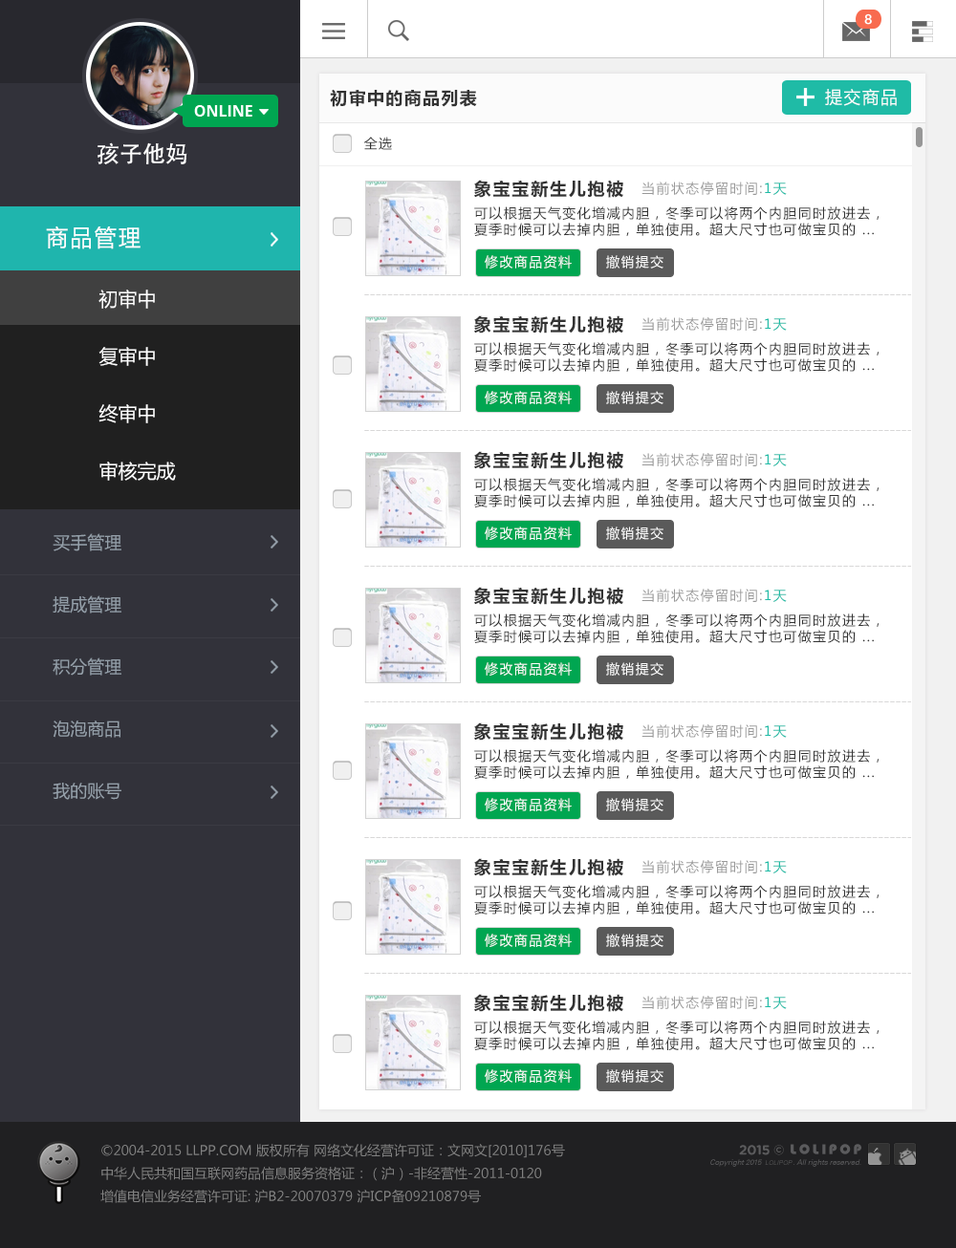
<style>
.page{position:relative;width:956px;height:1248px;background:#ffffff}
.page>*{position:absolute;margin:0}
.t1{font:17.2px "MicrosoftYaHei-Bold";letter-spacing:0.075em;color:#333333}
.t2{font:17.2px "MicrosoftYaHei";letter-spacing:0.075em;color:#ffffff}
.t3{font:15.3px "OpenSans-Bold";color:#ffffff;text-transform:uppercase}
.t4{font:13.4px "MicrosoftYaHei";letter-spacing:0.1em;color:#333333}
.t5{font:22.9px "AdobeHeitiStd-Regular";color:#ffffff}
.t6{font:17.2px "MicrosoftYaHei-Bold";letter-spacing:0.1em;color:#333333}
.t7{font:13.4px "MicrosoftYaHei";letter-spacing:0.1em;color:#999999}
.t8{font:13.4px "MicrosoftYaHei";letter-spacing:0.1em;color:#1fbba6}
.t9{font:22.9px "MicrosoftYaHei";letter-spacing:0.1em;color:#ffffff;scale:0.96 1}
.t10{font:13.4px "MicrosoftYaHei";letter-spacing:0.1em;color:#ffffff}
.t11{font:19.1px/57.3px "MicrosoftYaHei";color:#ffffff}
.t12{font:17.2px/62.1px "MicrosoftYaHei";color:#95a0aa}
</style>
<div class="page">
<p class="t1" style="left:330px;top:89px;width:147px;height:18px">初审中的商品列表</p>
<p class="t2" style="left:825px;top:89px;width:71px;height:17px">提交商品</p>
<p class="t3" style="left:194px;top:105px;width:58px;height:12px">Online</p>
<p class="t4" style="left:363px;top:137px;width:29px;height:13px">全选</p>
<p class="t5" style="left:97px;top:142px;width:90px;height:22px">孩子他妈</p>
<p class="t6" style="left:474px;top:180px;width:149px;height:18px">象宝宝新生儿抱被</p>
<p class="t7" style="left:641px;top:182px;width:145px;height:13px">当前状态停留时间:<span class="t8">1天</span></p>
<p class="t4" style="left:474px;top:206px;width:405px;height:30px">可以根据天气变化增减内胆，冬季可以将两个内胆同时放进去，夏季时候可以去掉内胆，单独使用。超大尺寸也可做宝贝的 ...</p>
<p class="t9" style="left:46px;top:226px;width:94px;height:23px">商品管理</p>
<p class="t10" style="left:484px;top:255px;width:87px;height:14px">修改商品资料</p>
<p class="t10" style="left:606px;top:255px;width:57px;height:14px">撤销提交</p>
<p class="t11" style="left:98px;top:290px;width:78px;height:191px">初审中<br>复审中<br>终审中<br>审核完成</p>
<p class="t6" style="left:474px;top:315px;width:149px;height:18px">象宝宝新生儿抱被</p>
<p class="t7" style="left:641px;top:317px;width:145px;height:14px">当前状态停留时间:<span class="t8">1天</span></p>
<p class="t4" style="left:474px;top:342px;width:405px;height:30px">可以根据天气变化增减内胆，冬季可以将两个内胆同时放进去，夏季时候可以去掉内胆，单独使用。超大尺寸也可做宝贝的 ...</p>
<p class="t10" style="left:484px;top:391px;width:87px;height:13px">修改商品资料</p>
<p class="t10" style="left:606px;top:391px;width:57px;height:13px">撤销提交</p>
<p class="t6" style="left:474px;top:451px;width:149px;height:18px">象宝宝新生儿抱被</p>
<p class="t7" style="left:641px;top:453px;width:145px;height:13px">当前状态停留时间:<span class="t8">1天</span></p>
<p class="t4" style="left:474px;top:478px;width:405px;height:29px">可以根据天气变化增减内胆，冬季可以将两个内胆同时放进去，夏季时候可以去掉内胆，单独使用。超大尺寸也可做宝贝的 ...</p>
<p class="t12" style="left:53px;top:533px;width:68px;height:267px">买手管理<br>提成管理<br>积分管理<br>泡泡商品<br>我的账号</p>
<p class="t10" style="left:484px;top:526px;width:87px;height:14px">修改商品资料</p>
<p class="t10" style="left:606px;top:526px;width:57px;height:14px">撤销提交</p>
<p class="t6" style="left:474px;top:587px;width:149px;height:18px">象宝宝新生儿抱被</p>
<p class="t7" style="left:641px;top:589px;width:145px;height:13px">当前状态停留时间:<span class="t8">1天</span></p>
<p class="t4" style="left:474px;top:613px;width:405px;height:30px">可以根据天气变化增减内胆，冬季可以将两个内胆同时放进去，夏季时候可以去掉内胆，单独使用。超大尺寸也可做宝贝的 ...</p>
<p class="t10" style="left:484px;top:662px;width:87px;height:14px">修改商品资料</p>
<p class="t10" style="left:606px;top:662px;width:57px;height:14px">撤销提交</p>
<p class="t6" style="left:474px;top:722px;width:149px;height:19px">象宝宝新生儿抱被</p>
<p class="t7" style="left:641px;top:724px;width:145px;height:14px">当前状态停留时间:<span class="t8">1天</span></p>
<p class="t4" style="left:474px;top:749px;width:405px;height:30px">可以根据天气变化增减内胆，冬季可以将两个内胆同时放进去，夏季时候可以去掉内胆，单独使用。超大尺寸也可做宝贝的 ...</p>
<p class="t10" style="left:484px;top:798px;width:87px;height:13px">修改商品资料</p>
<p class="t10" style="left:606px;top:798px;width:57px;height:13px">撤销提交</p>
<p class="t6" style="left:474px;top:858px;width:149px;height:18px">象宝宝新生儿抱被</p>
<p class="t7" style="left:641px;top:860px;width:145px;height:13px">当前状态停留时间:<span class="t8">1天</span></p>
<p class="t4" style="left:474px;top:885px;width:405px;height:29px">可以根据天气变化增减内胆，冬季可以将两个内胆同时放进去，夏季时候可以去掉内胆，单独使用。超大尺寸也可做宝贝的 ...</p>
<p class="t10" style="left:484px;top:934px;width:87px;height:13px">修改商品资料</p>
<p class="t10" style="left:606px;top:934px;width:57px;height:13px">撤销提交</p>
<p class="t6" style="left:474px;top:994px;width:149px;height:18px">象宝宝新生儿抱被</p>
<p class="t7" style="left:641px;top:996px;width:145px;height:13px">当前状态停留时间:<span class="t8">1天</span></p>
<p class="t4" style="left:474px;top:1021px;width:405px;height:29px">可以根据天气变化增减内胆，冬季可以将两个内胆同时放进去，夏季时候可以去掉内胆，单独使用。超大尺寸也可做宝贝的 ...</p>
<p class="t10" style="left:484px;top:1069px;width:87px;height:14px">修改商品资料</p>
<p class="t10" style="left:606px;top:1069px;width:57px;height:14px">撤销提交</p>
</div>
